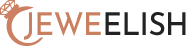
<style>
.page{position:relative;width:186px;height:46px;background:#ffffff}
.page>*{position:absolute;margin:0}
.t1{font:31.5px "JosefinSans-Medium";letter-spacing:-0.02em;color:#222222;text-transform:uppercase;scale:0.95 1}
.t2{font:31.5px "JosefinSans-Medium";letter-spacing:-0.02em;color:#c98060;text-transform:uppercase;scale:0.95 1}
</style>
<div class="page">
<p class="t1" style="left:24px;top:12px;width:162px;height:28px"><span class="t2">Jewe</span>elish</p>
</div>
